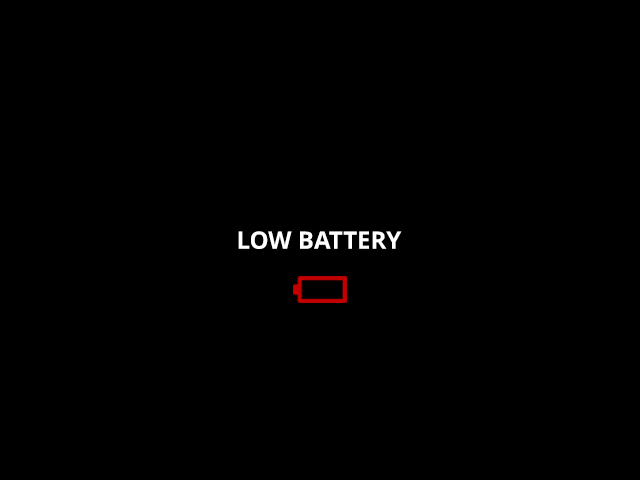
<style>
.page{position:relative;width:640px;height:480px;background:#000000}
.page>*{position:absolute;margin:0}
.t1{font:24px "NotoSans-Bold";color:#ffffff}
</style>
<div class="page">
<p class="t1" style="left:238px;top:231px;width:164px;height:18px">LOW BATTERY</p>
</div>
